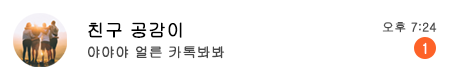
<style>
.page{position:relative;width:450px;height:80px;background:#ffffff}
.page>*{position:absolute;margin:0}
.t1{font:14px/24px "Gulim";letter-spacing:-0.005em;color:#494949;font-weight:bold}
.t2{font:18px/24px "Gulim";letter-spacing:-0.005em;color:#000000;font-weight:bold}
.t3{font:12px "Gulim";letter-spacing:-0.005em;color:#4e4e4e;font-weight:bold}
.t4{font:14px "Gulim";letter-spacing:-0.005em;color:#ffffff;font-weight:bold}
</style>
<div class="page">
<p class="t1" style="left:88px;top:22px;width:137px;height:37px"><span class="t2">친구 공감이<br></span>야야야 얼른 카톡봐봐</p>
<p class="t3" style="left:382px;top:22px;width:55px;height:11px">오후 7:24</p>
<p class="t4" style="left:423px;top:42px;width:4px;height:12px">1</p>
</div>
